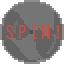
<style>
.page{position:relative;width:64px;height:64px;background:#636363}
.page>*{position:absolute;margin:0}
.t1{font:20px "OratorStd";color:#d04d3e}
</style>
<div class="page">
<p class="t1" style="left:6px;top:25px;width:53px;height:14px">SPIN!</p>
</div>
